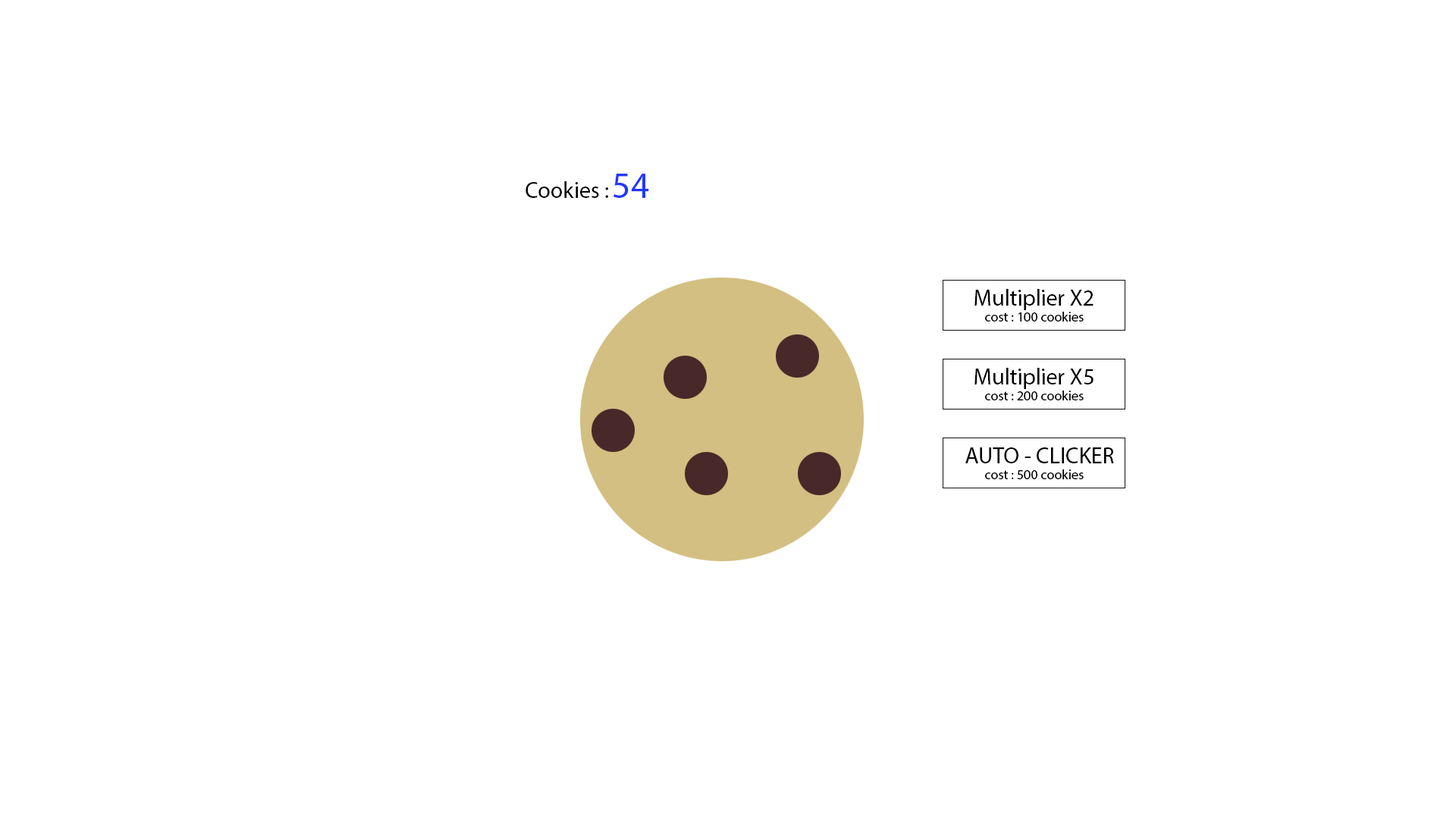
<style>
.page{position:relative;width:1456px;height:819px;background:#ffffff}
.page>*{position:absolute;margin:0}
.t1{font:36.4px "MyriadPro-Regular";color:#2237ff}
.t2{font:22.7px "MyriadPro-Regular";color:#000000}
.t3{font:13.6px "MyriadPro-Regular";color:#000000}
</style>
<div class="page">
<p class="t1" style="left:613px;top:174px;width:36px;height:24px">54</p>
<p class="t2" style="left:526px;top:181px;width:82px;height:17px">Cookies :</p>
<p class="t2" style="left:974px;top:289px;width:120px;height:21px">Multiplier X2</p>
<p class="t3" style="left:985px;top:312px;width:99px;height:10px">cost : 100 cookies</p>
<p class="t2" style="left:974px;top:368px;width:120px;height:21px">Multiplier X5</p>
<p class="t3" style="left:985px;top:391px;width:99px;height:9px">cost : 200 cookies</p>
<p class="t2" style="left:965px;top:447px;width:149px;height:16px">AUTO - CLICKER</p>
<p class="t3" style="left:985px;top:469px;width:99px;height:10px">cost : 500 cookies</p>
</div>
